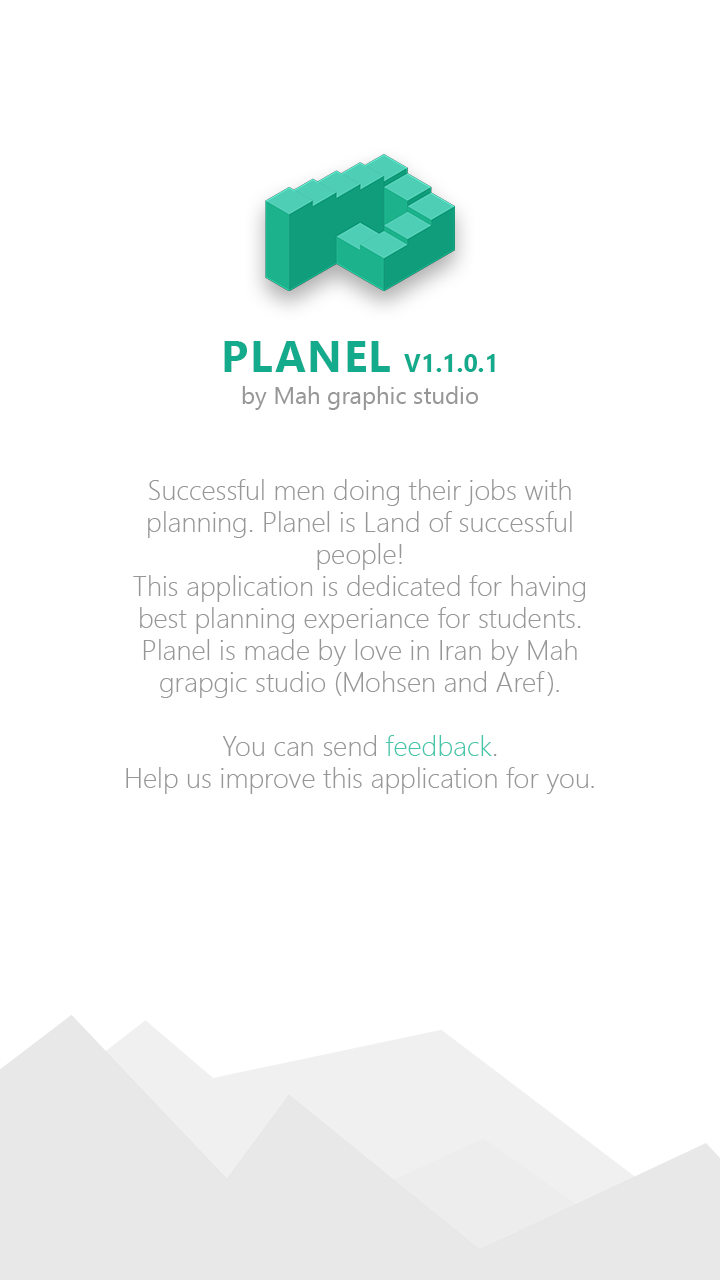
<style>
.page{position:relative;width:720px;height:1280px;background:#ffffff}
.page>*{position:absolute;margin:0}
.t1{font:28px/32px "SegoeUI-Light";color:#979797}
.t2{font:44px "SegoeUI-Bold";color:#13ab8b;text-transform:uppercase}
.t3{font:25px "SegoeUI-Bold";color:#13ab8b;text-transform:uppercase}
.t4{font:24px/32px "SegoeUI";color:#979797}
.t5{font:28px/32px "SegoeUI-Light";color:#46c6ab}
</style>
<div class="page">
<p class="t1" style="left:126px;top:341px;width:468px;height:453px;text-align:center"><span class="t2">Planel </span><span class="t3">v1.1.0.1<br></span><span class="t4">by Mah graphic studio<br><br><br></span>Successful men doing their jobs with <br>planning. Planel is Land of successful people! <br>This application is dedicated for having best planning experiance for students.<br>Planel is made by love in Iran by Mah grapgic studio (Mohsen and Aref).<br><br>You can send <span class="t5">feedback</span>. <br>Help us improve this application for you.</p>
</div>
